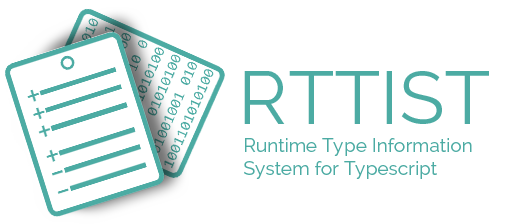
<style>
.page{position:relative;width:512px;height:224px;background:#ffffff}
.page>*{position:absolute;margin:0}
.t1{font:75px "Raleway-Regular";color:#4caca4}
.t2{font:19px "Raleway-Regular";color:#4caca4}
</style>
<div class="page">
<p class="t1" style="left:244px;top:71px;width:245px;height:53px">RTTIST</p>
<p class="t2" style="left:244px;top:138px;width:228px;height:41px">Runtime Type Information <br>System for Typescript</p>
</div>
